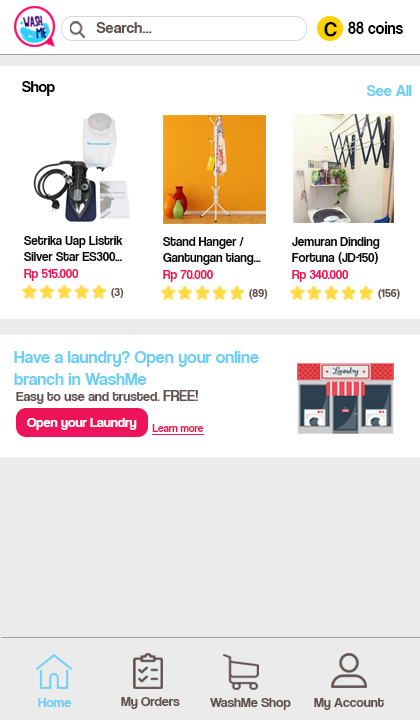
<style>
.page{position:relative;width:420px;height:720px;background:#ffffff}
.page>*{position:absolute;margin:0}
.t1{font:16px "CoolveticaRg-Regular";color:#605252}
.t2{font:21px "CoolveticaRg-Regular";color:#000000}
.t3{font:17.6px "CoolveticaRg-Regular";color:#000000;scale:0.92 1}
.t4{font:15.6px "CoolveticaRg-Regular";color:#000000}
.t5{font:16px "CoolveticaRg-Regular";color:#6dcff6}
.t6{font:13px "CoolveticaRg-Regular";color:#090909}
.t7{font:13px "CoolveticaRg-Regular";color:#ed145b}
.t8{font:12px "CoolveticaRg-Regular";color:#605252}
.t9{font:18px "CoolveticaRg-Regular";color:#6dcff6}
.t10{font:14px "CoolveticaRg-Regular";color:#605252}
.t11{font:15px "CoolveticaRg-Regular";color:#605252}
.t12{font:14px "CoolveticaRg-Regular";color:#ffffff}
.t13{font:11px "CoolveticaRg-Regular";color:#ed145b}
.t14{font:14px "CoolveticaRg-Regular";color:#6dcff6}
</style>
<div class="page">
<p class="t1" style="left:96px;top:22px;width:56px;height:11px">Search...</p>
<p class="t2" style="left:324px;top:22px;width:13px;height:15px">C</p>
<p class="t3" style="left:348px;top:21px;width:55px;height:13px">88 coins</p>
<p class="t4" style="left:22px;top:81px;width:33px;height:15px">Shop</p>
<p class="t5" style="left:366px;top:85px;width:46px;height:11px">See All</p>
<p class="t6" style="left:24px;top:236px;width:99px;height:25px">Setrika Uap Listrik <br>Silver Star ES300...</p>
<p class="t6" style="left:163px;top:237px;width:98px;height:28px">Stand Hanger /<br>Gantungan tiang...</p>
<p class="t6" style="left:292px;top:237px;width:88px;height:27px">Jemuran Dinding<br>Fortuna (JD-150)</p>
<p class="t7" style="left:24px;top:269px;width:55px;height:12px">Rp 515.000</p>
<p class="t7" style="left:163px;top:270px;width:50px;height:12px">Rp 70.000</p>
<p class="t7" style="left:292px;top:270px;width:57px;height:12px">Rp 340.000</p>
<p class="t8" style="left:111px;top:288px;width:13px;height:10px">(3)</p>
<p class="t8" style="left:249px;top:289px;width:19px;height:10px">(89)</p>
<p class="t8" style="left:378px;top:289px;width:22px;height:10px">(156)</p>
<p class="t9" style="left:14px;top:351px;width:245px;height:34px">Have a laundry? Open your online <br>branch in WashMe</p>
<p class="t10" style="left:16px;top:390px;width:182px;height:14px">Easy to use and trusted. <span class="t11">FREE!</span></p>
<p class="t12" style="left:27px;top:418px;width:110px;height:12px">Open your Laundry</p>
<p class="t13" style="left:152px;top:424px;width:52px;height:8px">Learn more</p>
<p class="t14" style="left:38px;top:698px;width:34px;height:9px">Home</p>
<p class="t10" style="left:121px;top:697px;width:59px;height:12px">My Orders</p>
<p class="t10" style="left:210px;top:698px;width:81px;height:12px">WashMe Shop</p>
<p class="t10" style="left:314px;top:698px;width:70px;height:12px">My Account</p>
</div>
